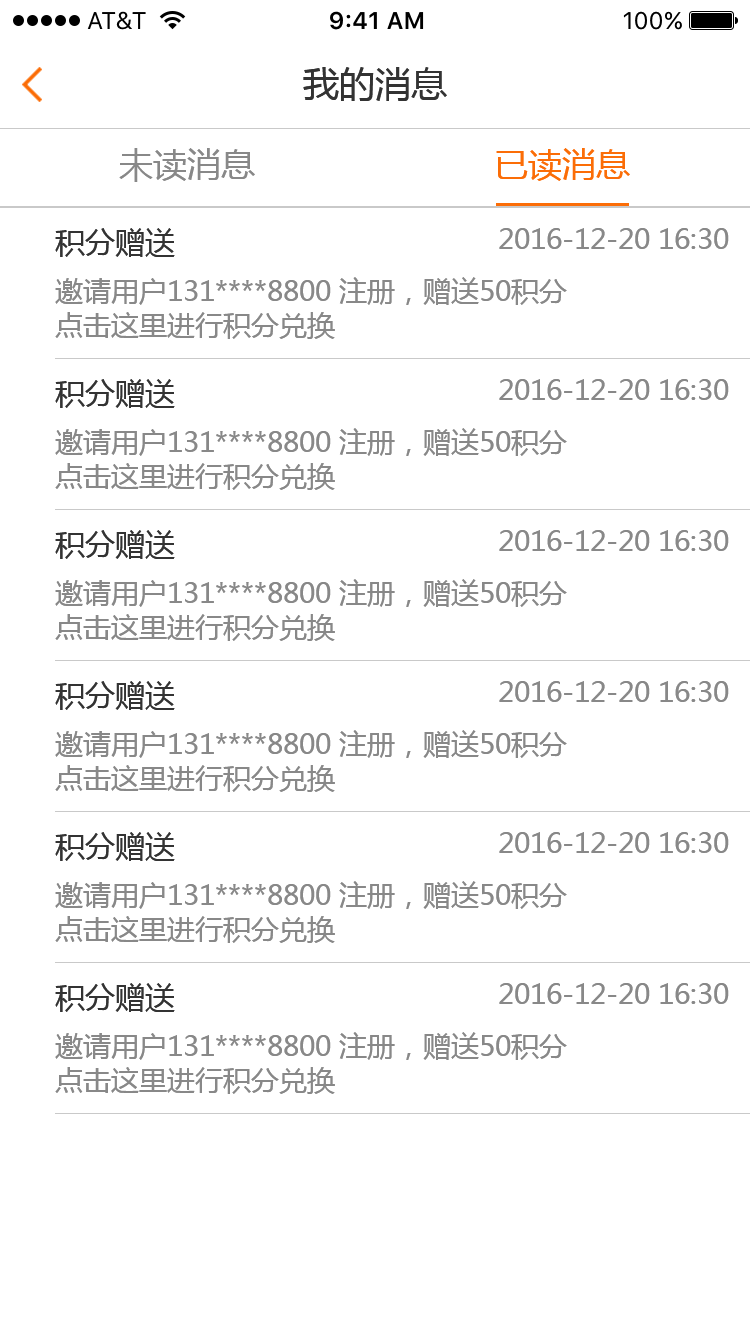
<style>
.page{position:relative;width:750px;height:1334px;background:#ffffff}
.page>*{position:absolute;margin:0}
.t1{font:36px "MicrosoftYaHei";color:#333333}
.t2{font:34px "MicrosoftYaHei";color:#888888}
.t3{font:34px "MicrosoftYaHei";color:#fb6d07}
.t4{font:30px "MicrosoftYaHei";color:#333333}
.t5{font:28px "MicrosoftYaHei";color:#888888}
</style>
<div class="page">
<p class="t1" style="left:303px;top:67px;width:144px;height:34px">我的消息</p>
<p class="t2" style="left:119px;top:148px;width:136px;height:34px">未读消息</p>
<p class="t3" style="left:496px;top:148px;width:134px;height:33px">已读消息</p>
<p class="t4" style="left:55px;top:228px;width:120px;height:29px">积分赠送</p>
<p class="t5" style="left:499px;top:228px;width:230px;height:21px">2016-12-20 16:30</p>
<p class="t5" style="left:55px;top:277px;width:512px;height:62px">邀请用户131****8800 注册，赠送50积分<br>点击这里进行积分兑换</p>
<p class="t4" style="left:55px;top:379px;width:120px;height:29px">积分赠送</p>
<p class="t5" style="left:499px;top:379px;width:230px;height:21px">2016-12-20 16:30</p>
<p class="t5" style="left:55px;top:428px;width:512px;height:62px">邀请用户131****8800 注册，赠送50积分<br>点击这里进行积分兑换</p>
<p class="t4" style="left:55px;top:530px;width:120px;height:29px">积分赠送</p>
<p class="t5" style="left:499px;top:530px;width:230px;height:21px">2016-12-20 16:30</p>
<p class="t5" style="left:55px;top:579px;width:512px;height:62px">邀请用户131****8800 注册，赠送50积分<br>点击这里进行积分兑换</p>
<p class="t4" style="left:55px;top:681px;width:120px;height:29px">积分赠送</p>
<p class="t5" style="left:499px;top:681px;width:230px;height:21px">2016-12-20 16:30</p>
<p class="t5" style="left:55px;top:730px;width:512px;height:62px">邀请用户131****8800 注册，赠送50积分<br>点击这里进行积分兑换</p>
<p class="t4" style="left:55px;top:832px;width:120px;height:29px">积分赠送</p>
<p class="t5" style="left:499px;top:832px;width:230px;height:21px">2016-12-20 16:30</p>
<p class="t5" style="left:55px;top:881px;width:512px;height:62px">邀请用户131****8800 注册，赠送50积分<br>点击这里进行积分兑换</p>
<p class="t4" style="left:55px;top:983px;width:120px;height:29px">积分赠送</p>
<p class="t5" style="left:499px;top:983px;width:230px;height:21px">2016-12-20 16:30</p>
<p class="t5" style="left:55px;top:1032px;width:512px;height:62px">邀请用户131****8800 注册，赠送50积分<br>点击这里进行积分兑换</p>
</div>
